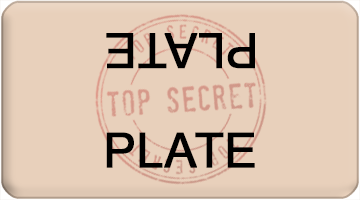
<style>
.page{position:relative;width:360px;height:200px;background:#e8d0bb}
.page>*{position:absolute;margin:0}
.t1{font:48px "ArialMT";color:#000000;font-weight:bold}
</style>
<div class="page">
<p class="t1" style="left:106px;top:33px;width:149px;height:36px;rotate:180deg">PLATE</p>
<p class="t1" style="left:106px;top:132px;width:149px;height:36px">PLATE</p>
</div>
